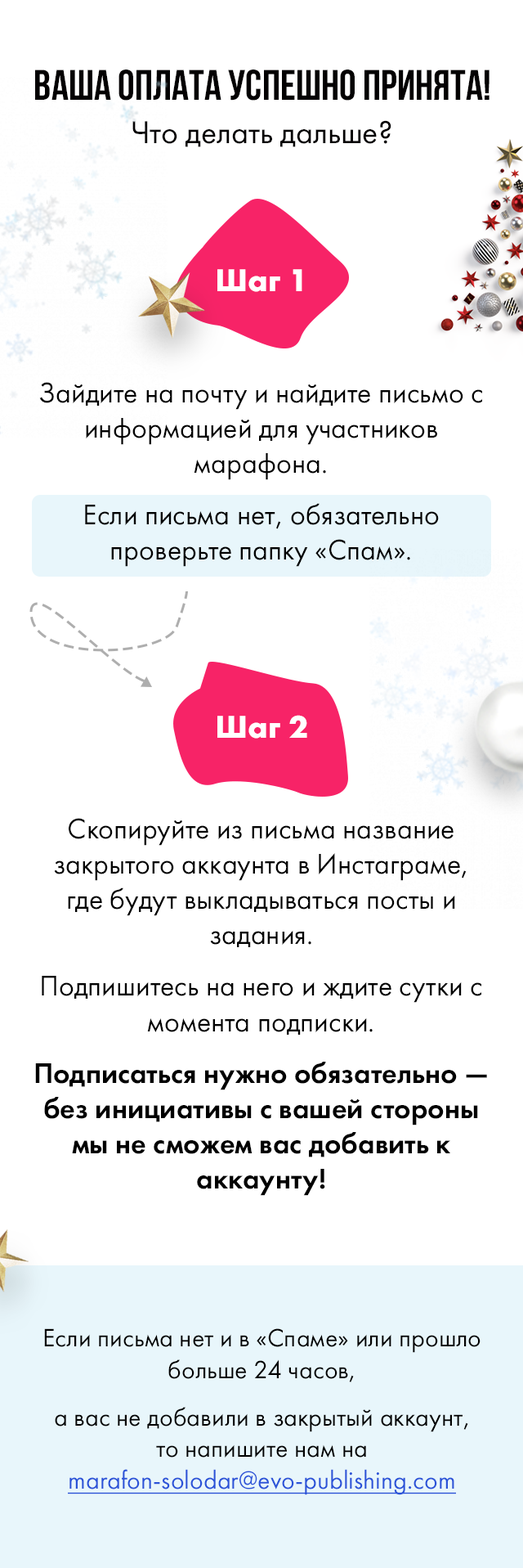
<style>
.page{position:relative;width:523px;height:1568px;background:#ffffff}
.page>*{position:absolute;margin:0}
.t1{font:42.5px "BebasNeueBold";color:#030102}
.t2{font:32.7px "FuturaPT-Book";color:#030102}
.t3{font:32.7px "FuturaPT-Bold";color:#ffffff}
.t4{font:29.4px "FuturaPT-Book";color:#000000}
.t5{font:29.4px "FuturaPT-Demi";color:#000000}
.t6{font:26.2px "FuturaPT-Book";color:#000000}
.t7{font:26.2px "FuturaPT-Book";color:#2a53d8;text-decoration:underline}
</style>
<div class="page">
<p class="t1" style="left:35px;top:70px;width:455px;height:31px">Ваша оплата успешно принята!</p>
<p class="t2" style="left:133px;top:120px;width:259px;height:27px">Что делать дальше?</p>
<p class="t3" style="left:218px;top:269px;width:85px;height:23px">Шаг 1</p>
<p class="t4" style="left:39px;top:382px;width:444px;height:185px;text-align:center">Зайдите на почту и найдите письмо с информацией для участников марафона. <br>Если письма нет, обязательно проверьте папку «Спам».</p>
<p class="t3" style="left:218px;top:715px;width:90px;height:24px">Шаг 2</p>
<p class="t4" style="left:35px;top:818px;width:452px;height:378px;text-align:center">Скопируйте из письма название закрытого аккаунта в Инстаграме, где будут выкладываться посты и задания. <br>Подпишитесь на него и ждите сутки с момента подписки.<br><span class="t5">Подписаться нужно обязательно — без инициативы с вашей стороны мы не сможем вас добавить к аккаунту!</span></p>
<p class="t6" style="left:44px;top:1328px;width:437px;height:167px;text-align:center">Если письма нет и в «Спаме» или прошло больше 24 часов, <br>а вас не добавили в закрытый аккаунт, <br>то напишите нам на <br><span class="t7">marafon-solodar@evo-publishing.com</span></p>
</div>
